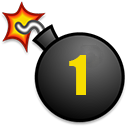
<style>
.page{position:relative;width:128px;height:128px;background:#ffffff}
.page>*{position:absolute;margin:0}
.t1{font:50px "Impact";color:#f6dc00}
</style>
<div class="page">
<p class="t1" style="left:69px;top:55px;width:17px;height:40px">1</p>
</div>
